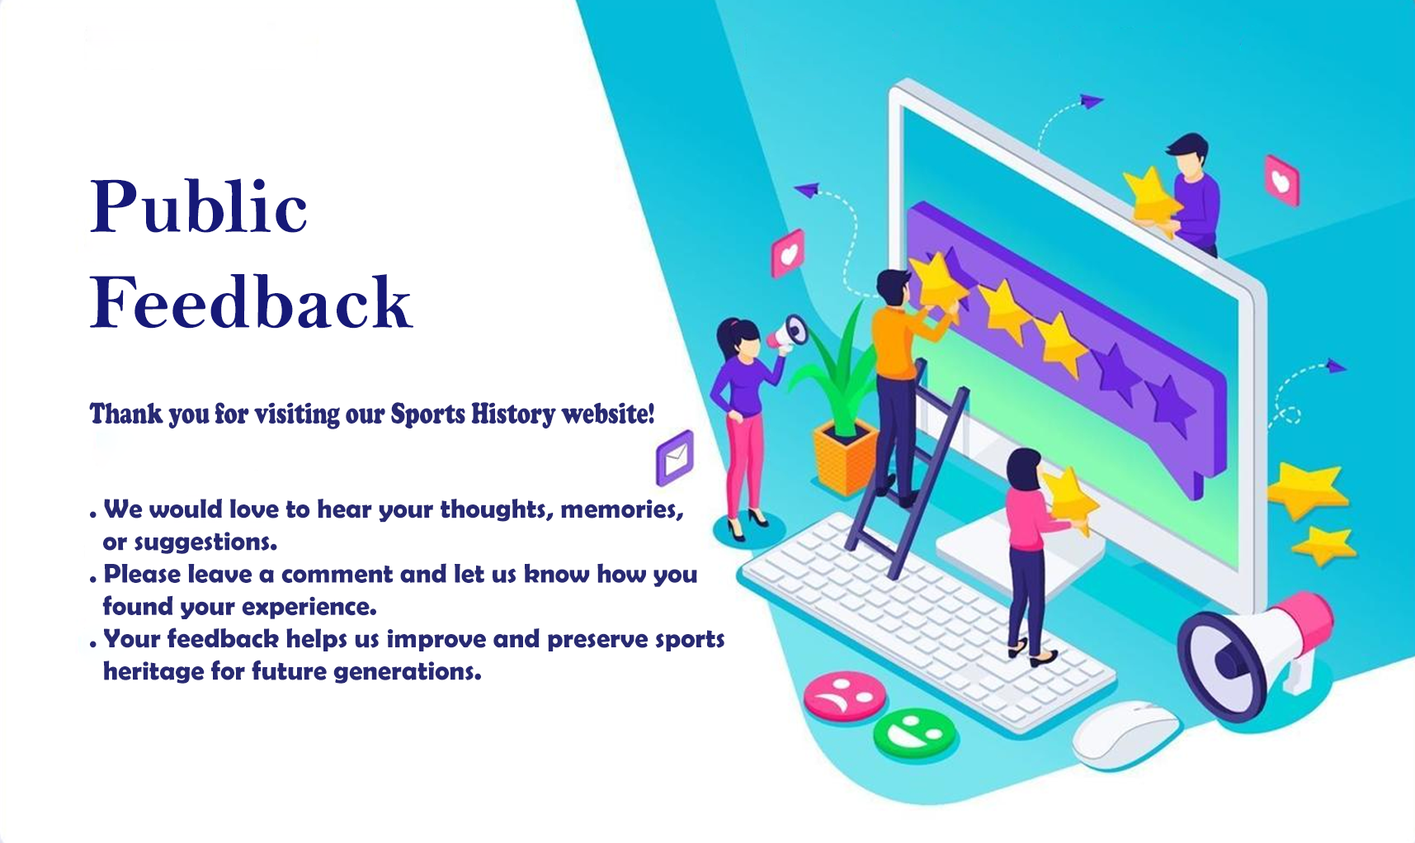
<style>
.page{position:relative;width:1415px;height:843px;background:#ffffff}
.page>*{position:absolute;margin:0}
.t1{font:79.5px "BellMTBold";color:#161978}
.t2{font:30.6px "CooperBlack";color:#282a73;scale:0.72 1}
.t3{font:27px "BerlinSansFBDemi-Bold";color:#282a73}
</style>
<div class="page">
<p class="t1" style="left:89px;top:177px;width:324px;height:151px">Public<br>Feedback</p>
<p class="t2" style="left:89px;top:402px;width:565px;height:27px">Thank you for visiting our Sports History website!</p>
<p class="t3" style="left:90px;top:498px;width:635px;height:185px">. We would love to hear your thoughts, memories,<br>  or suggestions.<br>. Please leave a comment and let us know how you<br>  found your experience.<br>. Your feedback helps us improve and preserve sports<br>  heritage for future generations.</p>
</div>
